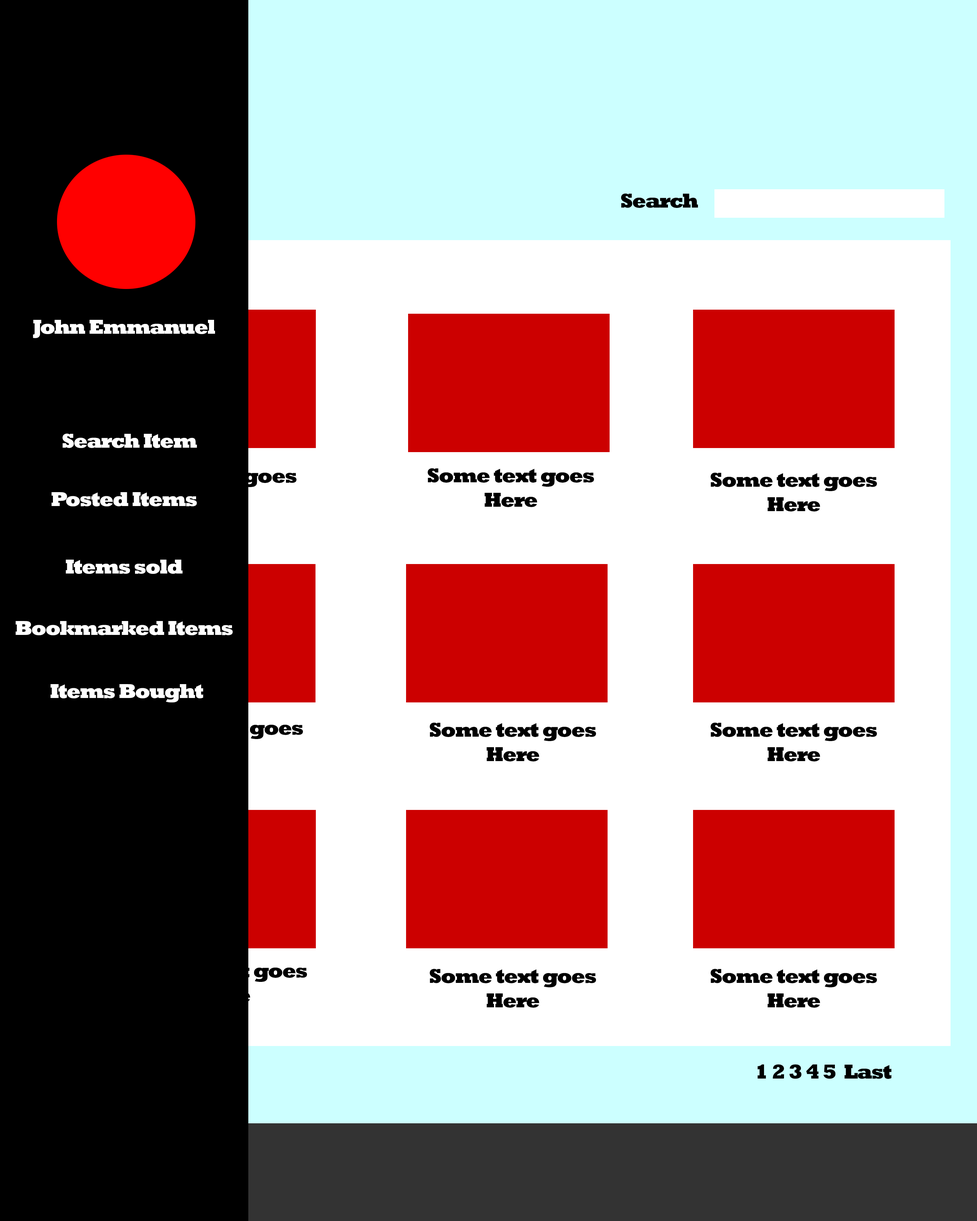
<style>
.page{position:relative;width:977px;height:1221px;background:#ffffff}
.page>*{position:absolute;margin:0}
.t1{font:20.3px "Rockwell-ExtraBold";letter-spacing:-0.05em;color:#000000}
.t2{font:20.3px "Rockwell-ExtraBold";letter-spacing:-0.05em;color:#ffffff}
</style>
<div class="page">
<p class="t1" style="left:621px;top:193px;width:77px;height:15px">Search</p>
<p class="t2" style="left:33px;top:320px;width:182px;height:18px">John Emmanuel</p>
<p class="t2" style="left:62px;top:433px;width:135px;height:15px">Search Item</p>
<p class="t1" style="left:130px;top:468px;width:166px;height:39px;text-align:center">Some text goes<br>Here</p>
<p class="t1" style="left:427px;top:468px;width:167px;height:39px;text-align:center">Some text goes<br>Here</p>
<p class="t1" style="left:710px;top:472px;width:167px;height:39px;text-align:center">Some text goes<br>Here</p>
<p class="t2" style="left:52px;top:492px;width:145px;height:14px">Posted Items</p>
<p class="t2" style="left:66px;top:560px;width:116px;height:14px">Items sold</p>
<p class="t2" style="left:16px;top:621px;width:217px;height:14px">Bookmarked Items</p>
<p class="t2" style="left:51px;top:684px;width:152px;height:18px">Items Bought</p>
<p class="t1" style="left:136px;top:720px;width:167px;height:39px;text-align:center">Some text goes<br>Here</p>
<p class="t1" style="left:429px;top:722px;width:167px;height:39px;text-align:center">Some text goes<br>Here</p>
<p class="t1" style="left:710px;top:722px;width:167px;height:39px;text-align:center">Some text goes<br>Here</p>
<p class="t1" style="left:140px;top:963px;width:167px;height:39px;text-align:center">Some text goes<br>Here</p>
<p class="t1" style="left:429px;top:969px;width:167px;height:39px;text-align:center">Some text goes<br>Here</p>
<p class="t1" style="left:710px;top:969px;width:167px;height:39px;text-align:center">Some text goes<br>Here</p>
<p class="t1" style="left:757px;top:1064px;width:134px;height:15px">1 2 3 4 5  Last</p>
</div>
